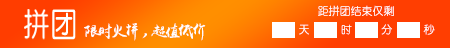
<style>
.page{position:relative;width:450px;height:48px}
.page>*{position:absolute;margin:0}
.t1{font:11px "YouYuan";color:#ffffff}
.t2{font:16.3px "yuweij";letter-spacing:-0.18em;color:#ffffff}
</style>
<div class="page">
<p class="t1" style="left:318px;top:5px;width:76px;height:12px">距拼团结束仅剩</p>
<p class="t2" style="left:84px;top:23px;width:122px;height:18px">限时火拼,超值低价</p>
</div>
